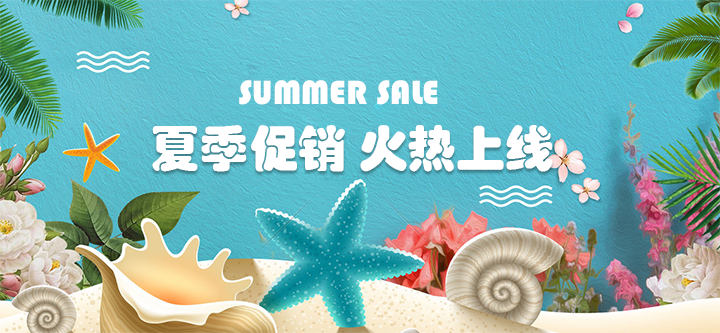
<style>
.page{position:relative;width:720px;height:333px}
.page>*{position:absolute;margin:0}
.t1{font:26.1px "STHupo";color:#ffffff}
.t2{font:37px "STHupo";color:#ffffff}
</style>
<div class="page">
<p class="t1" style="left:239px;top:80px;width:199px;height:25px">SUMMER SALE</p>
<p class="t2" style="left:152px;top:125px;width:401px;height:47px">夏季促销 火热上线</p>
</div>
